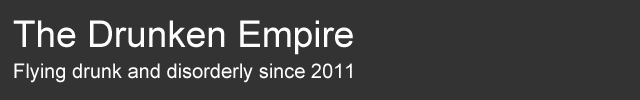
<style>
.page{position:relative;width:640px;height:100px;background:#333333}
.page>*{position:absolute;margin:0}
.t1{font:37px "ArialMT";color:#fefefe}
.t2{font:20px "ArialMT";color:#fefefe}
</style>
<div class="page">
<p class="t1" style="left:13px;top:20px;width:340px;height:35px">The Drunken Empire</p>
<p class="t2" style="left:14px;top:63px;width:338px;height:20px">Flying drunk and disorderly since 2011</p>
</div>
